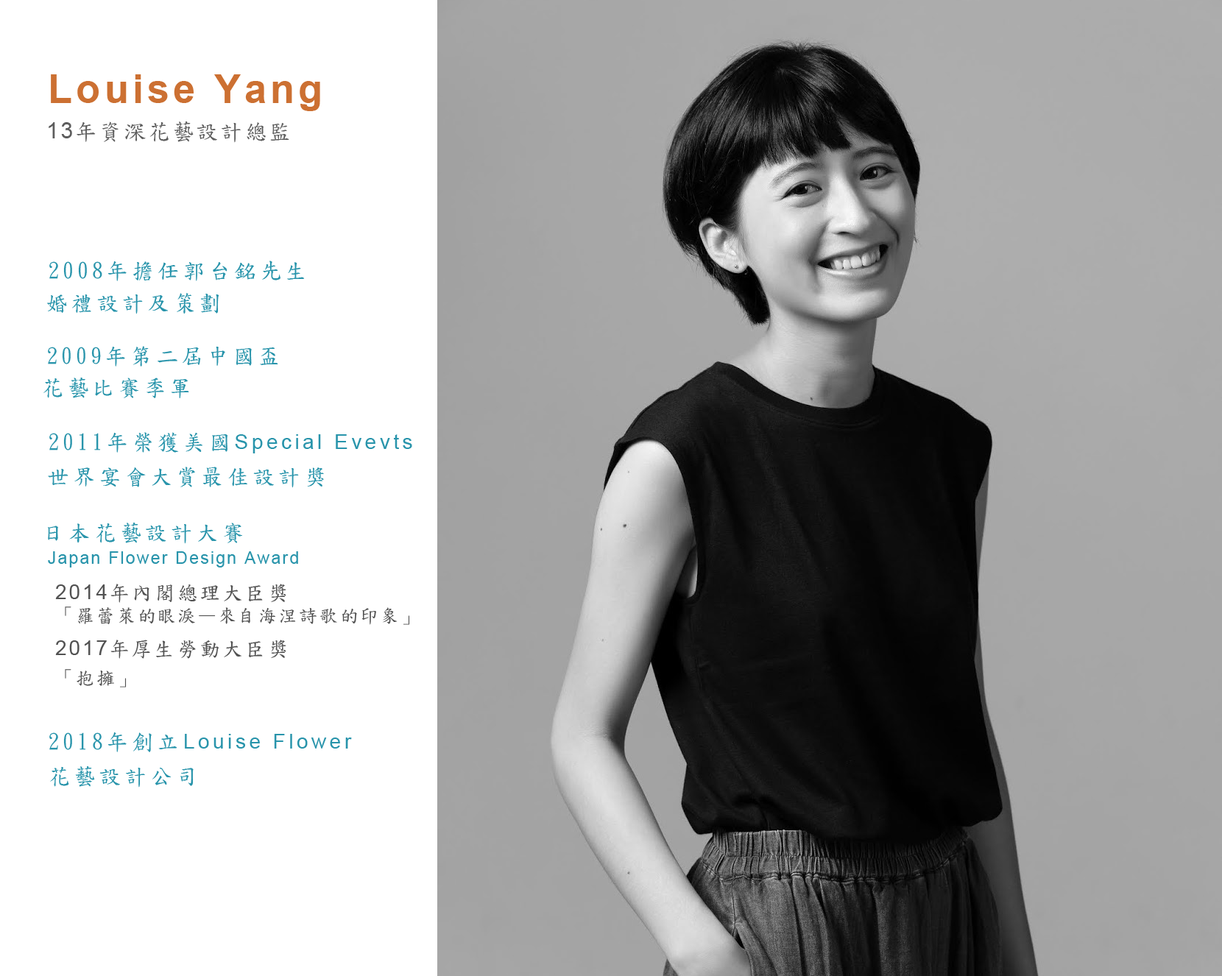
<style>
.page{position:relative;width:1222px;height:976px;background:#ffffff}
.page>*{position:absolute;margin:0}
.t1{font:39.5px "Arial-BoldMT";letter-spacing:0.1em;color:#cc7032}
.t2{font:22.1px "DFKaiShu-SB-Estd-BF";letter-spacing:0.1em;color:#5d5d5d}
.t3{font:22.1px "ArialMT";letter-spacing:0.1em;color:#5d5d5d}
.t4{font:22.1px "DFKaiShu-SB-Estd-BF";letter-spacing:0.16em;color:#2894ab}
.t5{font:20.6px "ArialMT";letter-spacing:0.16em;color:#2894ab}
.t6{font:16.9px "ArialMT";letter-spacing:0.1em;color:#2894ab}
.t7{font:20.6px "DFKaiShu-SB-Estd-BF";letter-spacing:0.1em;color:#525252}
.t8{font:20.6px "ArialMT";letter-spacing:0.1em;color:#525252}
.t9{font:18.4px "DFKaiShu-SB-Estd-BF";letter-spacing:0.1em;color:#525252}
</style>
<div class="page">
<p class="t1" style="left:51px;top:74px;width:269px;height:37px">Louise Yang</p>
<p class="t2" style="left:49px;top:121px;width:240px;height:22px"><span class="t3">13</span>年資深花藝設計總監</p>
<p class="t4" style="left:49px;top:261px;width:256px;height:20px">2008年擔任郭台銘先生</p>
<p class="t4" style="left:47px;top:293px;width:172px;height:21px">婚禮設計及策劃</p>
<p class="t4" style="left:48px;top:346px;width:230px;height:21px">2009年第二屆中國盃</p>
<p class="t4" style="left:43px;top:378px;width:146px;height:20px">花藝比賽季軍</p>
<p class="t5" style="left:49px;top:432px;width:363px;height:21px"><span class="t4">2011年榮獲美國</span>Special Evevts</p>
<p class="t4" style="left:48px;top:467px;width:276px;height:21px">世界宴會大賞最佳設計獎</p>
<p class="t4" style="left:48px;top:523px;width:194px;height:21px">日本花藝設計大賽</p>
<p class="t6" style="left:48px;top:551px;width:250px;height:16px">Japan Flower Design Award</p>
<p class="t7" style="left:55px;top:584px;width:231px;height:19px"><span class="t8">2014</span>年內閣總理大臣獎</p>
<p class="t9" style="left:65px;top:606px;width:345px;height:19px">「羅蕾萊的眼淚—來自海涅詩歌的印象」</p>
<p class="t7" style="left:55px;top:640px;width:231px;height:19px"><span class="t8">2017</span>年厚生勞動大臣獎</p>
<p class="t9" style="left:65px;top:669px;width:62px;height:18px">「抱擁」</p>
<p class="t5" style="left:49px;top:732px;width:303px;height:20px"><span class="t4">2018年創立</span>Louise Flower</p>
<p class="t4" style="left:50px;top:766px;width:144px;height:22px">花藝設計公司</p>
</div>
